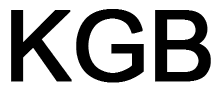
<style>
.page{position:relative;width:216px;height:92px;background:#ffffff}
.page>*{position:absolute;margin:0}
.t1{font:98px "ArialMT";letter-spacing:-0.01em;color:#000000;font-weight:bold}
</style>
<div class="page">
<p class="t1" style="left:11px;top:9px;width:200px;height:74px">KGB</p>
</div>
